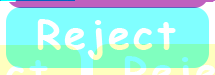
<style>
.page{position:relative;width:215px;height:75px;background:#80ffff}
.page>*{position:absolute;margin:0}
.t1{font:40px "ComicSansMS-Bold";letter-spacing:0.07em;color:#ffffff}
</style>
<div class="page">
<p class="t1" style="left:37px;top:19px;width:139px;height:41px">Reject</p>
</div>
